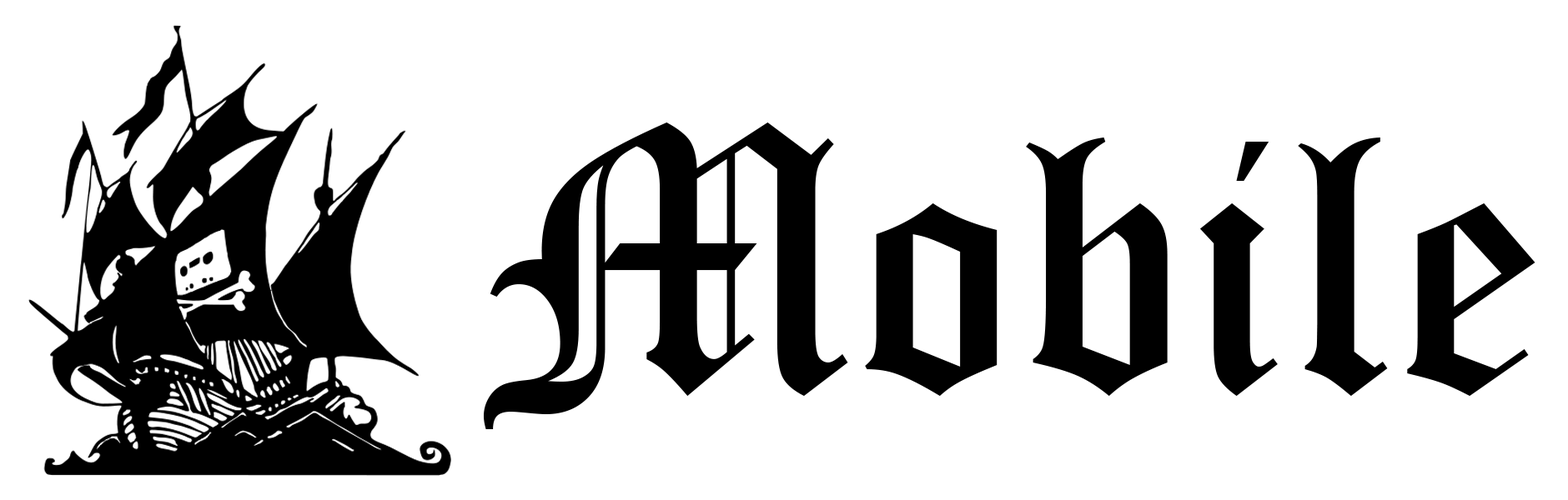
<style>
.page{position:relative;width:1568px;height:500px;background:#ffffff}
.page>*{position:absolute;margin:0}
.t1{font:369.6px "OldEnglishTextMT";color:#000000}
</style>
<div class="page">
<p class="t1" style="left:484px;top:123px;width:1051px;height:307px">Mobile</p>
</div>
